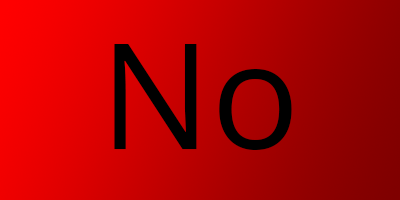
<style>
.page{position:relative;width:400px;height:200px}
.page>*{position:absolute;margin:0}
.t1{font:147.4px "OpenSans";color:#000000}
</style>
<div class="page">
<p class="t1" style="left:114px;top:44px;width:178px;height:106px">No</p>
</div>
